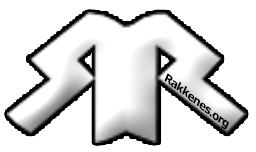
<style>
.page{position:relative;width:256px;height:152px;background:#ffffff}
.page>*{position:absolute;margin:0}
.t1{font:11.3px "Verdana-Bold";letter-spacing:-0.075em;color:#000000;scale:1.04 1}
</style>
<div class="page">
<p class="t1" style="left:164px;top:73px;width:66px;height:57px;rotate:38deg">Rakkenes.org</p>
</div>
